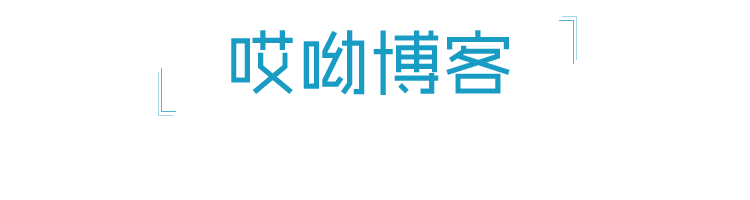
<style>
.page{position:relative;width:750px;height:200px;background:#ffffff}
.page>*{position:absolute;margin:0}
.t1{font:72px "MFShangHei_Noncommercial-Regular";color:#199cc4}
</style>
<div class="page">
<p class="t1" style="left:231px;top:30px;width:279px;height:65px">哎呦博客</p>
</div>
